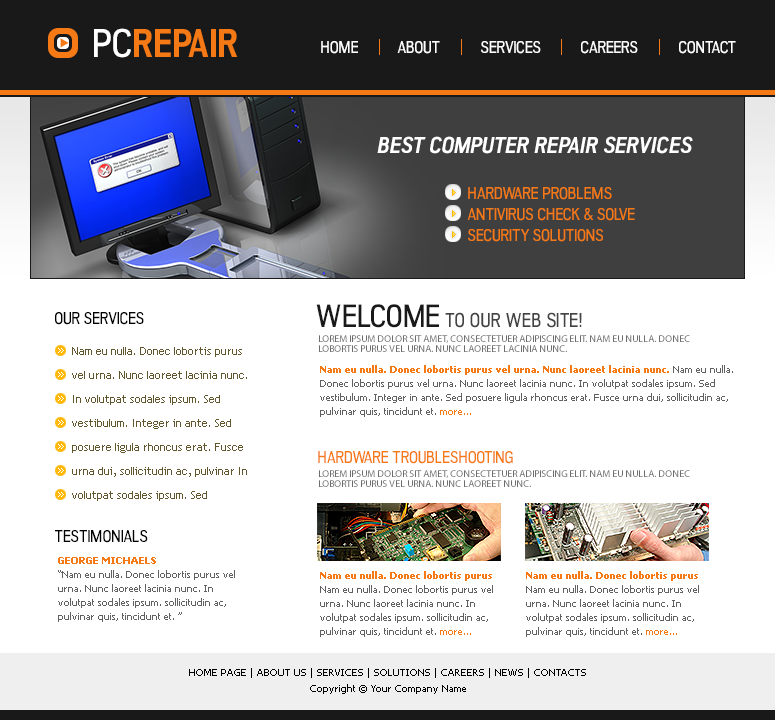
<style>
.page{position:relative;width:775px;height:720px;background:#ffffff}
.page>*{position:absolute;margin:0}
.t1{font:40px "Akazan-Bold";color:#f57915}
.t2{font:40px "AkazanRg";color:#ffffff}
.t3{font:17px "AkazanRg";color:#ffffff}
.t4{font:23px "Akazan-BoldItalic";color:#ffffff}
.t5{font:17px "AkazanRg";color:#f57915}
.t6{font:20px "AkazanRg";color:#434343}
.t7{font:32px "AkazanRg";color:#191919}
.t8{font:17px "AkazanRg";color:#000000}
.t9{font:10px "MyriadPro-Regular";color:#6d6d6d}
.t10{font:11px/24px "TrebuchetMS";color:#62562e}
.t11{font:10px/14px "Tahoma";color:#616161}
.t12{font:10px/12px "Tahoma-Bold";color:#f57915}
.t13{font:10px/14px "Tahoma";color:#f57915}
.t14{font:10px/16px "Tahoma";color:#000000}
</style>
<div class="page">
<p class="t1" style="left:94px;top:28px;width:144px;height:30px"><span class="t2">PC</span>REPAIR</p>
<p class="t3" style="left:321px;top:41px;width:37px;height:13px">HOME</p>
<p class="t3" style="left:397px;top:41px;width:43px;height:13px">ABOUT</p>
<p class="t3" style="left:481px;top:41px;width:60px;height:13px">SERVICES</p>
<p class="t3" style="left:581px;top:41px;width:57px;height:13px">CAREERS</p>
<p class="t3" style="left:679px;top:41px;width:57px;height:13px">CONTACT</p>
<p class="t4" style="left:377px;top:136px;width:316px;height:18px">BEST COMPUTER REPAIR SERVICES</p>
<p class="t5" style="left:468px;top:187px;width:144px;height:13px">HARDWARE PROBLEMS</p>
<p class="t5" style="left:467px;top:208px;width:168px;height:13px">ANTIVIRUS CHECK &amp; SOLVE</p>
<p class="t5" style="left:468px;top:229px;width:135px;height:13px">SECURITY SOLUTIONS</p>
<p class="t6" style="left:316px;top:304px;width:266px;height:24px"><span class="t7">WELCOME</span> TO OUR WEB SITE!</p>
<p class="t8" style="left:55px;top:312px;width:89px;height:13px">OUR SERVICES</p>
<p class="t9" style="left:319px;top:335px;width:371px;height:17px">LOREM IPSUM DOLOR SIT AMET, CONSECTETUER ADIPISCING ELIT. NAM EU NULLA. DONEC LOBORTIS PURUS VEL URNA. NUNC LAOREET LACINIA NUNC.</p>
<p class="t10" style="left:72px;top:347px;width:175px;height:154px">Nam eu nulla. Donec lobortis purus vel urna. Nunc laoreet lacinia nunc. In volutpat sodales ipsum. Sed vestibulum. Integer in ante. Sed posuere ligula rhoncus erat. Fusce urna dui, sollicitudin ac, pulvinar In volutpat sodales ipsum. Sed</p>
<p class="t11" style="left:320px;top:365px;width:413px;height:52px"><span class="t12">Nam eu nulla. Donec lobortis purus vel urna. Nunc laoreet lacinia nunc. </span>Nam eu nulla. Donec lobortis purus vel urna. Nunc laoreet lacinia nunc. In volutpat sodales ipsum. Sed vestibulum. Integer in ante. Sed posuere ligula rhoncus erat. Fusce urna dui, sollicitudin ac, pulvinar quis, tincidunt et. <span class="t13">more...</span></p>
<p class="t5" style="left:318px;top:451px;width:195px;height:13px">HARDWARE TROUBLESHOOTING</p>
<p class="t9" style="left:319px;top:470px;width:371px;height:17px">LOREM IPSUM DOLOR SIT AMET, CONSECTETUER ADIPISCING ELIT. NAM EU NULLA. DONEC LOBORTIS PURUS VEL URNA. NUNC LAOREET NUNC.</p>
<p class="t8" style="left:55px;top:530px;width:93px;height:13px">TESTIMONIALS</p>
<p class="t11" style="left:58px;top:557px;width:177px;height:65px"><span class="t12">GEORGE MICHAELS<br></span>“Nam eu nulla. Donec lobortis purus vel urna. Nunc laoreet lacinia nunc. In volutpat sodales ipsum. sollicitudin ac, pulvinar quis, tincidunt et. ”</p>
<p class="t11" style="left:320px;top:571px;width:173px;height:66px"><span class="t12">Nam eu nulla. Donec lobortis purus </span>Nam eu nulla. Donec lobortis purus vel urna. Nunc laoreet lacinia nunc. In volutpat sodales ipsum. sollicitudin ac, pulvinar quis, tincidunt et. <span class="t13">more...</span></p>
<p class="t11" style="left:526px;top:571px;width:173px;height:66px"><span class="t12">Nam eu nulla. Donec lobortis purus </span>Nam eu nulla. Donec lobortis purus vel urna. Nunc laoreet lacinia nunc. In volutpat sodales ipsum. sollicitudin ac, pulvinar quis, tincidunt et. <span class="t13">more...</span></p>
<p class="t14" style="left:189px;top:668px;width:397px;height:26px;text-align:center">HOME PAGE | ABOUT US | SERVICES | SOLUTIONS | CAREERS | NEWS | CONTACTS<br>Copyright © Your Company Name</p>
</div>
